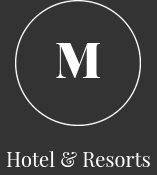
<style>
.page{position:relative;width:157px;height:175px;background:#333333}
.page>*{position:absolute;margin:0}
.t1{font:48px "PlayfairDisplay-Black";letter-spacing:0.005em;color:#ffffff}
.t2{font:20px "PlayfairDisplay-Regular";letter-spacing:0.005em;color:#ffffff}
</style>
<div class="page">
<p class="t1" style="left:56px;top:43px;width:44px;height:35px">M</p>
<p class="t2" style="left:6px;top:151px;width:144px;height:16px">Hotel &amp; Resorts</p>
</div>
